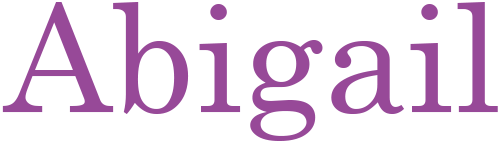
<style>
.page{position:relative;width:500px;height:143px;background:#ffffff}
.page>*{position:absolute;margin:0}
.t1{font:150px "Century";color:#974998}
</style>
<div class="page">
<p class="t1" style="left:2px;top:2px;width:496px;height:139px">Abigail</p>
</div>
